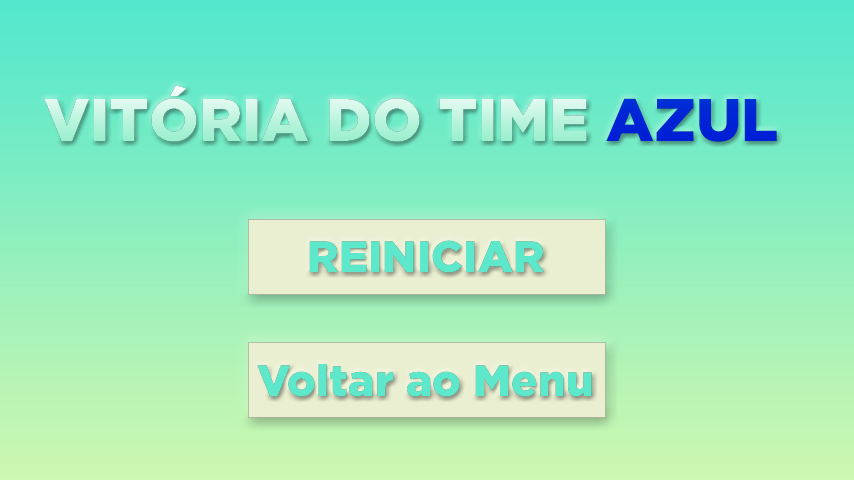
<style>
.page{position:relative;width:854px;height:480px}
.page>*{position:absolute;margin:0}
.t1{font:60px "Gotham-Black"}
.t2{font:60px "Gotham-Black";color:#0022d6}
.t3{font:44px "Gotham-Black";color:#5de8cb}
</style>
<div class="page">
<p class="t1" style="left:44px;top:85px;width:543px;height:57px">VITÓRIA DO TIME</p>
<p class="t2" style="left:606px;top:98px;width:171px;height:44px">AZUL</p>
<p class="t3" style="left:309px;top:240px;width:235px;height:33px">REINICIAR</p>
<p class="t3" style="left:257px;top:364px;width:335px;height:33px">Voltar ao Menu</p>
</div>
